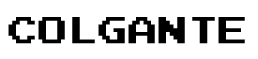
<style>
.page{position:relative;width:258px;height:59px;background:#ffffff}
.page>*{position:absolute;margin:0}
.t1{font:30px "PressStart2P";color:#000000}
</style>
<div class="page">
<p class="t1" style="left:8px;top:17px;width:237px;height:27px">COLGANTE</p>
</div>
